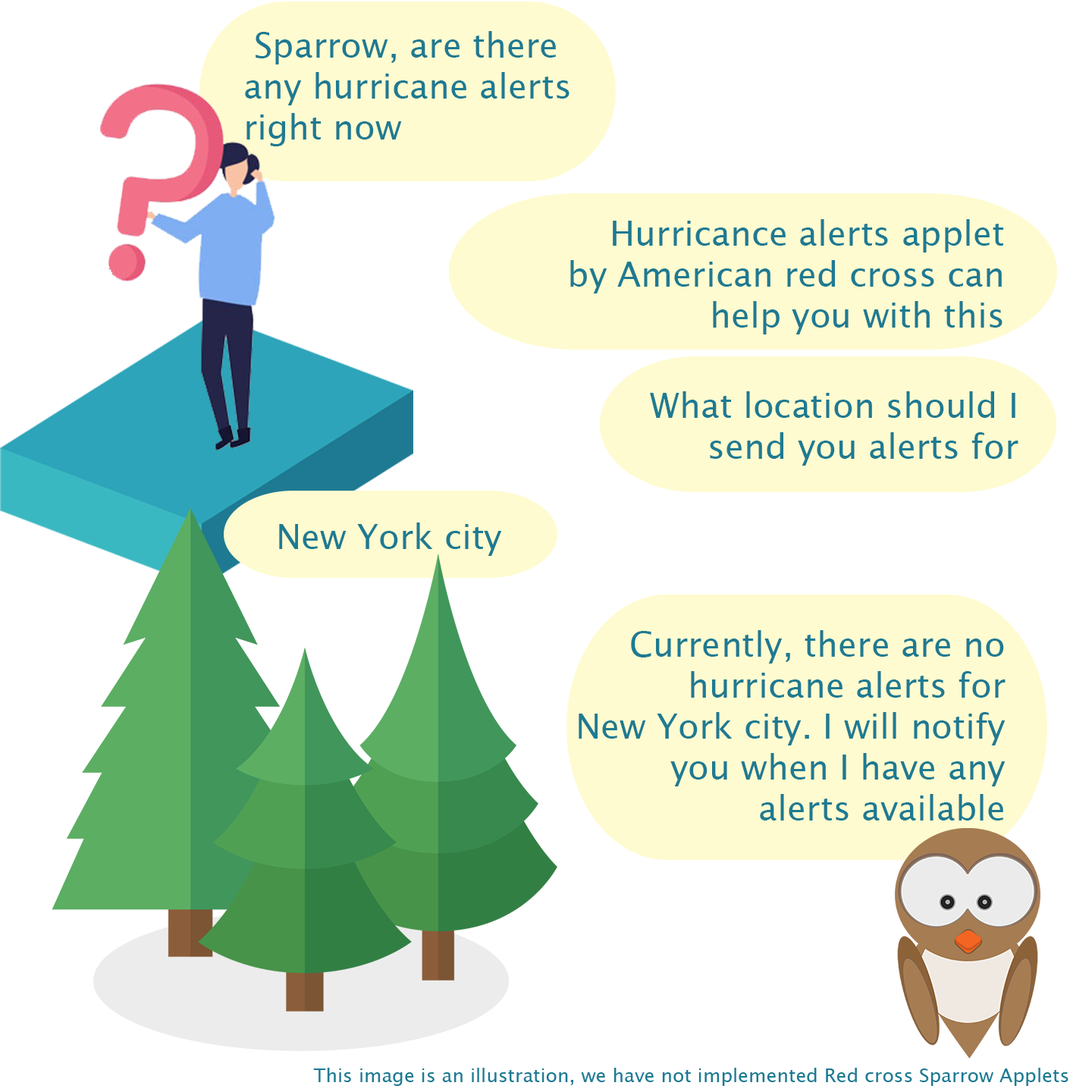
<style>
.page{position:relative;width:1092px;height:1092px;background:#ffffff}
.page>*{position:absolute;margin:0}
.t1{font:34.1px "LucidaSansUnicode";color:#1e7a92}
.t2{font:19px "LucidaSansUnicode";color:#1e7a92}
</style>
<div class="page">
<p class="t1" style="left:245px;top:31px;width:325px;height:115px;text-align:right">Sparrow, are there <br>any hurricane alerts<br>right now</p>
<p class="t1" style="left:570px;top:219px;width:434px;height:115px">Hurricance alerts applet<br>by American red cross can <br>help you with this</p>
<p class="t1" style="left:650px;top:391px;width:368px;height:75px">What location should I <br>send you alerts for</p>
<p class="t1" style="left:279px;top:522px;width:223px;height:34px">New York city</p>
<p class="t1" style="left:579px;top:630px;width:427px;height:191px">Currently, there are no<br>hurricane alerts for <br>New York city. I will notify <br>you when I have any <br>alerts available</p>
<p class="t2" style="left:313px;top:1068px;width:755px;height:18px">This image is an illustration, we have not implemented Red cross Sparrow Applets</p>
</div>
